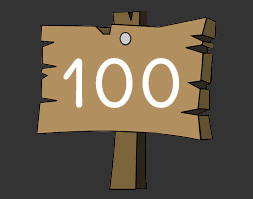
<style>
.page{position:relative;width:253px;height:199px;background:#333333}
.page>*{position:absolute;margin:0}
.t1{font:64px "DeliusUnicase-Regular";color:#ffffff}
</style>
<div class="page">
<p class="t1" style="left:63px;top:58px;width:117px;height:50px">100</p>
</div>
